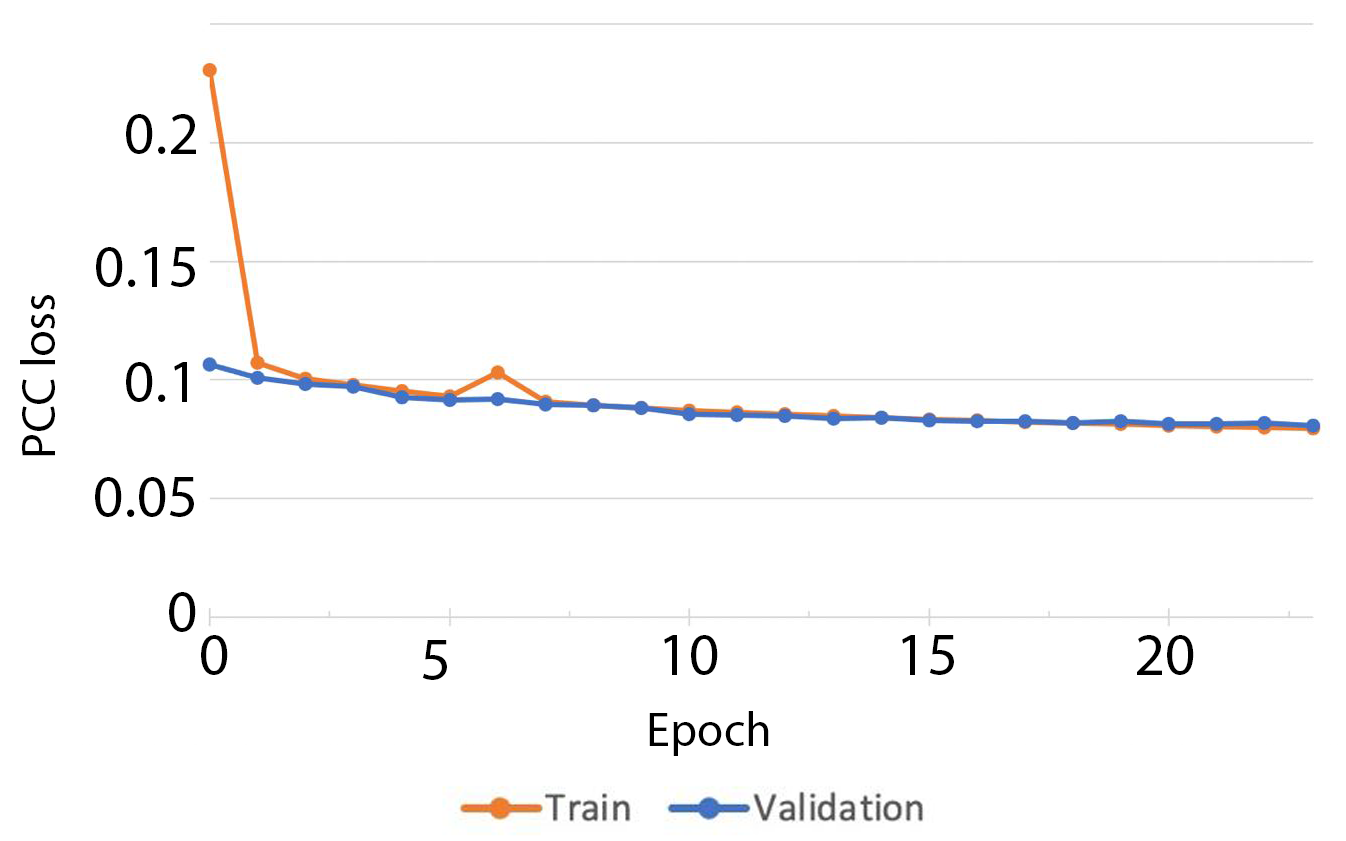
<style>
.page{position:relative;width:1346px;height:841px;background:#ffffff}
.page>*{position:absolute;margin:0}
.t1{font:60px "MyriadPro-Regular";color:#000000}
.t2{font:48px "MyriadPro-Regular";color:#000000}
</style>
<div class="page">
<p class="t1" style="left:126px;top:114px;width:70px;height:40px">0.2</p>
<p class="t1" style="left:96px;top:247px;width:99px;height:40px">0.15</p>
<p class="t2" style="left:20px;top:295px;width:35px;height:161px;rotate:-90deg">PCC loss</p>
<p class="t1" style="left:126px;top:362px;width:61px;height:40px">0.1</p>
<p class="t1" style="left:95px;top:477px;width:99px;height:40px">0.05</p>
<p class="t1" style="left:169px;top:592px;width:27px;height:40px">0</p>
<p class="t1" style="left:201px;top:635px;width:27px;height:40px">0</p>
<p class="t1" style="left:422px;top:640px;width:25px;height:40px">5</p>
<p class="t1" style="left:664px;top:635px;width:54px;height:40px">10</p>
<p class="t1" style="left:902px;top:635px;width:52px;height:40px">15</p>
<p class="t1" style="left:1137px;top:635px;width:57px;height:40px">20</p>
<p class="t2" style="left:649px;top:711px;width:120px;height:45px">Epoch</p>
</div>
